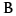
<style>
.page{position:relative;width:16px;height:16px;background:#ffffff}
.page>*{position:absolute;margin:0}
.t1{font:16.7px "Athelas-Regular";color:#000000}
</style>
<div class="page">
<p class="t1" style="left:3px;top:2px;width:10px;height:11px">B</p>
</div>
